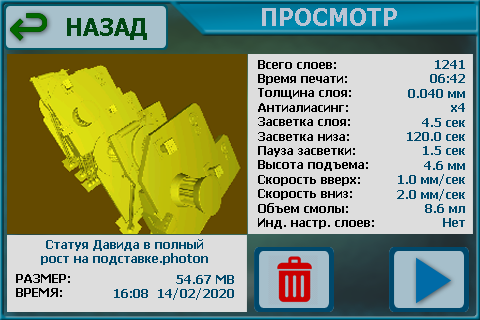
<style>
.page{position:relative;width:480px;height:320px;background:#dddddd}
.page>*{position:absolute;margin:0}
.t1{font:24px "Tahoma-Bold";color:#bac5d5}
.t2{font:24px "Tahoma-Bold";color:#004612}
.t3{font:12px "Tahoma-Bold";color:#000000}
.t4{font:12px "Tahoma-Bold";color:#00496c}
</style>
<div class="page">
<p class="t1" style="left:262px;top:8px;width:135px;height:18px">ПРОСМОТР</p>
<p class="t2" style="left:67px;top:18px;width:80px;height:22px">НАЗАД</p>
<p class="t3" style="left:258px;top:60px;width:116px;height:169px">Всего слоев:<br>Время печати:<br>Толщина слоя:<br>Антиалиасинг:<br>Засветка слоя:<br>Засветка низа:<br>Пауза засветки:<br>Высота подъема:<br>Скорость вверх:<br>Скорость вниз:<br>Объем смолы:<br>Инд. настр. слоев:</p>
<p class="t4" style="left:397px;top:60px;width:68px;height:167px;text-align:right">1241<br>06:42<br>0.040 мм<br>x4<br>4.5 сек<br>120.0 сек<br>1.5 сек<br>4.6 мм<br>1.0 мм/сек<br>2.0 мм/сек<br>8.6 мл<br>Нет</p>
<p class="t4" style="left:41px;top:239px;width:167px;height:26px;text-align:center">Статуя Давида в полный<br>рост на подставке.photon</p>
<p class="t3" style="left:16px;top:274px;width:54px;height:23px">РАЗМЕР:<br>ВРЕМЯ:</p>
<p class="t4" style="left:114px;top:275px;width:120px;height:25px;text-align:right">54.67 MB<br>16:08  14/02/2020</p>
</div>
